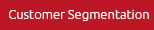
<style>
.page{position:relative;width:154px;height:30px;background:#bd1725}
.page>*{position:absolute;margin:0}
.t1{font:13px "Ubuntu-Light";color:#ffffff}
</style>
<div class="page">
<p class="t1" style="left:9px;top:10px;width:140px;height:11px">Customer Segmentation</p>
</div>
